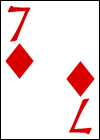
<style>
.page{position:relative;width:100px;height:140px;background:#ffffff}
.page>*{position:absolute;margin:0}
.t1{font:60px "HighTowerText-Reg";color:#da0000}
</style>
<div class="page">
<p class="t1" style="left:8px;top:5px;width:23px;height:37px">7</p>
<p class="t1" style="left:69px;top:98px;width:23px;height:37px;rotate:180deg">7</p>
</div>
